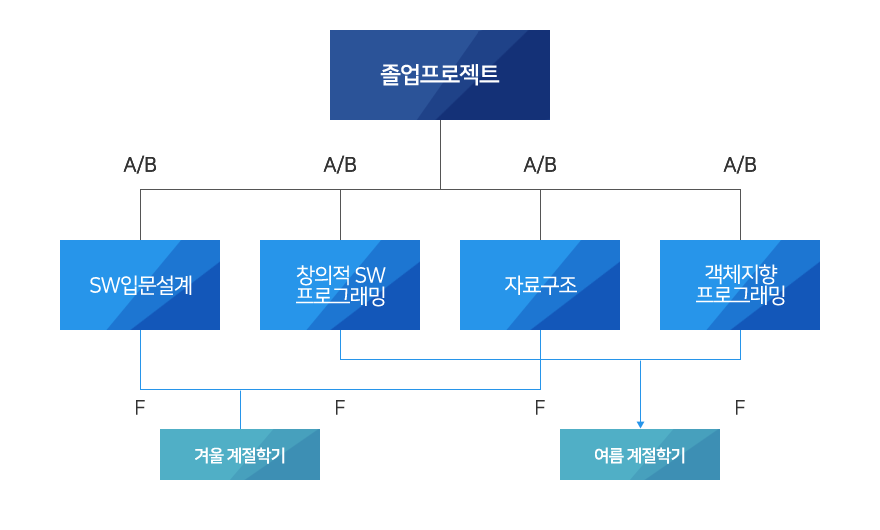
<style>
.page{position:relative;width:880px;height:530px;background:#ffffff}
.page>*{position:absolute;margin:0}
.t1{font:23px "NanumSquareB";letter-spacing:-0.05em;color:#ffffff}
.t2{font:20px "NanumSquareR";color:#333333}
.t3{font:21px/21px "NanumSquareR";letter-spacing:-0.05em;color:#ffffff}
.t4{font:21px "NanumSquareR";letter-spacing:-0.05em;color:#ffffff}
.t5{font:17px "NanumSquareB";letter-spacing:-0.05em;color:#ffffff}
</style>
<div class="page">
<p class="t1" style="left:380px;top:64px;width:120px;height:22px">졸업프로젝트</p>
<p class="t2" style="left:123px;top:155px;width:33px;height:19px">A/B</p>
<p class="t2" style="left:123px;top:155px;width:33px;height:19px">A/B</p>
<p class="t2" style="left:323px;top:155px;width:33px;height:19px">A/B</p>
<p class="t2" style="left:323px;top:155px;width:33px;height:19px">A/B</p>
<p class="t2" style="left:523px;top:155px;width:33px;height:19px">A/B</p>
<p class="t2" style="left:523px;top:155px;width:33px;height:19px">A/B</p>
<p class="t2" style="left:723px;top:155px;width:33px;height:19px">A/B</p>
<p class="t2" style="left:723px;top:155px;width:33px;height:19px">A/B</p>
<p class="t3" style="left:296px;top:265px;width:90px;height:42px;text-align:center">창의적 SW<br>프로그래밍</p>
<p class="t3" style="left:696px;top:264px;width:89px;height:42px;text-align:center">객체지향<br>프로그래밍</p>
<p class="t4" style="left:90px;top:275px;width:102px;height:20px">SW입문설계</p>
<p class="t4" style="left:505px;top:275px;width:72px;height:20px">자료구조</p>
<p class="t2" style="left:136px;top:400px;width:9px;height:15px">F</p>
<p class="t2" style="left:336px;top:400px;width:9px;height:15px">F</p>
<p class="t2" style="left:536px;top:400px;width:9px;height:15px">F</p>
<p class="t2" style="left:736px;top:400px;width:9px;height:15px">F</p>
<p class="t5" style="left:195px;top:447px;width:90px;height:17px">겨울 계절학기</p>
<p class="t5" style="left:595px;top:447px;width:90px;height:17px">여름 계절학기</p>
</div>
